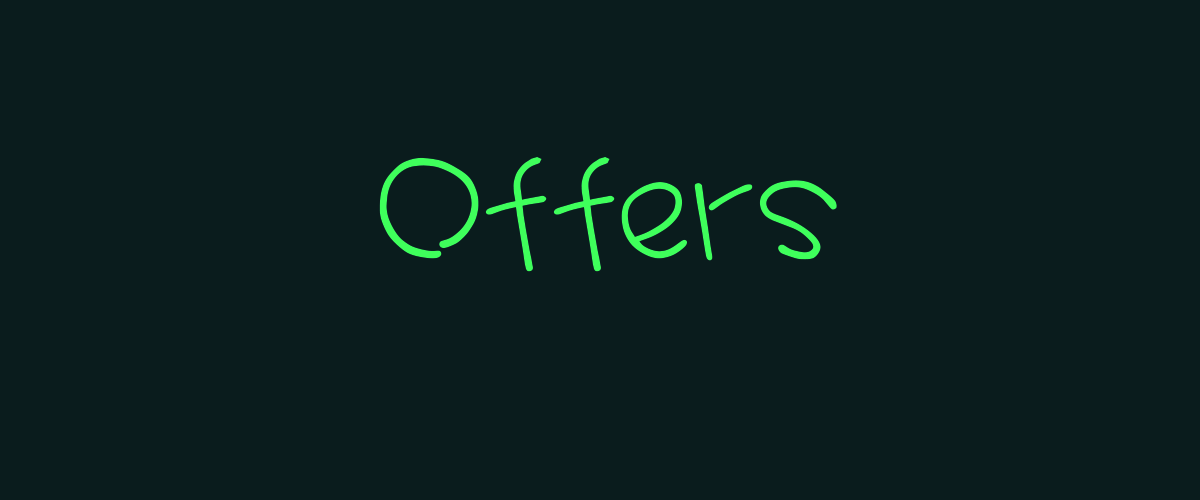
<style>
.page{position:relative;width:1200px;height:500px;background:#0a1c1d}
.page>*{position:absolute;margin:0}
.t1{font:150px "JYaYa";color:#3fff5b}
</style>
<div class="page">
<p class="t1" style="left:379px;top:156px;width:458px;height:116px">Offers</p>
</div>
